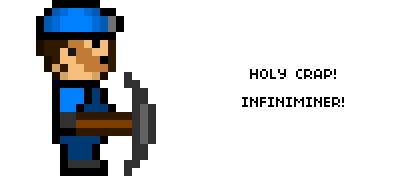
<style>
.page{position:relative;width:400px;height:176px;background:#ffffff}
.page>*{position:absolute;margin:0}
.t1{font:16px/14px "04b03";color:#000000}
</style>
<div class="page">
<p class="t1" style="left:242px;top:69px;width:102px;height:38px;text-align:center">HOLY CRAP!<br><br>INFINIMINER!</p>
</div>
